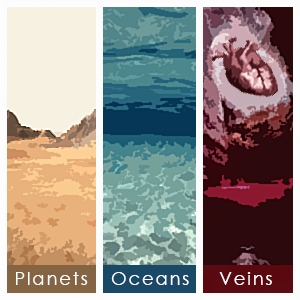
<style>
.page{position:relative;width:300px;height:300px}
.page>*{position:absolute;margin:0}
.t1{font:18px "CenturyGothic";letter-spacing:0.1em;color:#ffffff}
</style>
<div class="page">
<p class="t1" style="left:16px;top:272px;width:72px;height:13px">Planets</p>
<p class="t1" style="left:111px;top:272px;width:78px;height:13px">Oceans</p>
<p class="t1" style="left:219px;top:272px;width:53px;height:13px">Veins</p>
</div>
